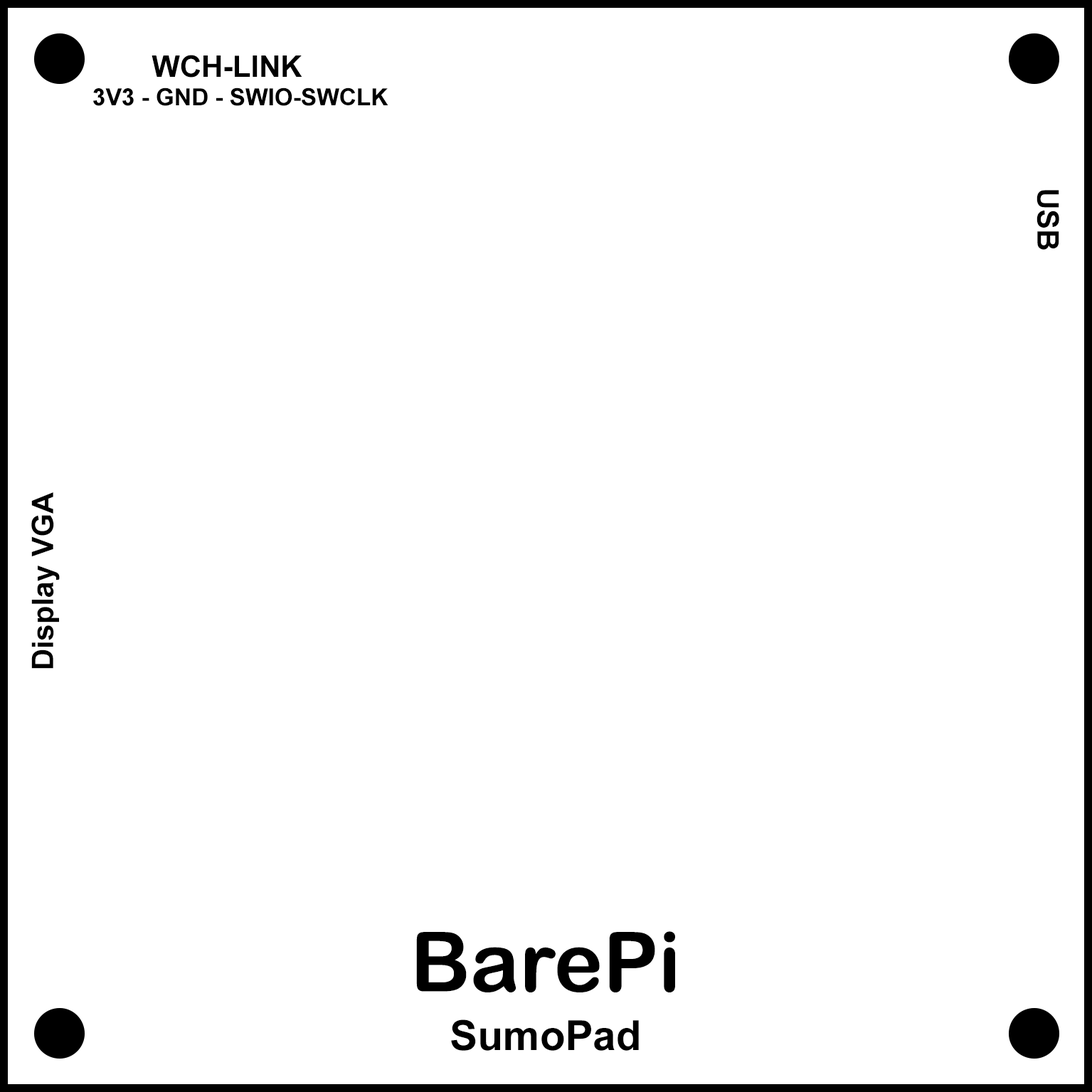
<style>
.page{position:relative;width:1092px;height:1092px;background:#ffffff}
.page>*{position:absolute;margin:0}
.t1{font:23.7px "Arial-BoldMT";color:#000000}
.t2{font:29.6px "Arial-BoldMT";color:#000000}
.t3{font:82.7px "ArialRoundedMTBold";color:#000000}
.t4{font:41.5px "Arial-BoldMT";color:#000000}
</style>
<div class="page">
<p class="t1" style="left:93px;top:55px;width:295px;height:51px;text-align:center"><span class="t2">WCH-LINK<br></span>    3V3 - GND - SWIO-SWCLK</p>
<p class="t2" style="left:1036px;top:190px;width:23px;height:60px;rotate:90deg">USB</p>
<p class="t2" style="left:31px;top:492px;width:29px;height:177px;rotate:-90deg">Display VGA</p>
<p class="t3" style="left:416px;top:931px;width:259px;height:61px">BarePi</p>
<p class="t4" style="left:451px;top:1019px;width:188px;height:32px">SumoPad</p>
</div>
